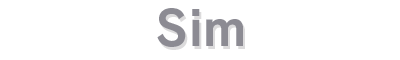
<style>
.page{position:relative;width:400px;height:60px;background:#ffffff}
.page>*{position:absolute;margin:0}
.t1{font:48px "RodinPro-B";color:#8c8b93}
</style>
<div class="page">
<p class="t1" style="left:157px;top:8px;width:86px;height:39px">Sim</p>
</div>
